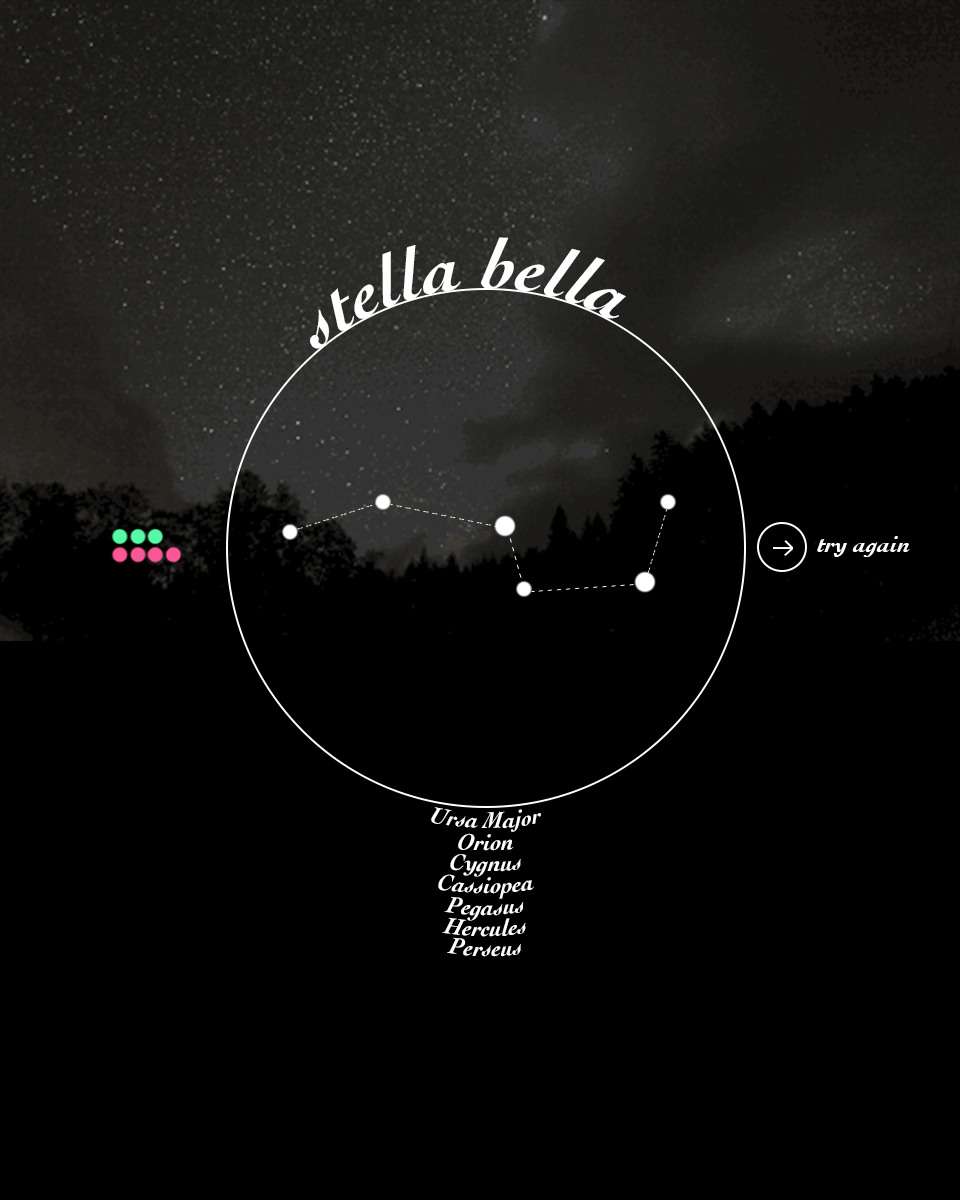
<style>
.page{position:relative;width:960px;height:1200px;background:#000000}
.page>*{position:absolute;margin:0}
.t1{font:72px "Cochin-BoldItalic";color:#ffffff}
.t2{font:24px "Cochin-BoldItalic";color:#ffffff}
</style>
<div class="page">
<p class="t1" style="left:310px;top:237px;width:316px;height:112px">stella bella</p>
<p class="t2" style="left:817px;top:536px;width:93px;height:21px">try again</p>
<p class="t2" style="left:431px;top:807px;width:110px;height:25px">Ursa Major</p>
<p class="t2" style="left:458px;top:833px;width:56px;height:18px">Orion</p>
<p class="t2" style="left:450px;top:854px;width:71px;height:23px">Cygnus</p>
<p class="t2" style="left:438px;top:874px;width:96px;height:25px">Cassiopea</p>
<p class="t2" style="left:444px;top:896px;width:80px;height:25px">Pegasus</p>
<p class="t2" style="left:442px;top:917px;width:84px;height:20px">Hercules</p>
<p class="t2" style="left:447px;top:937px;width:74px;height:20px">Perseus</p>
</div>
